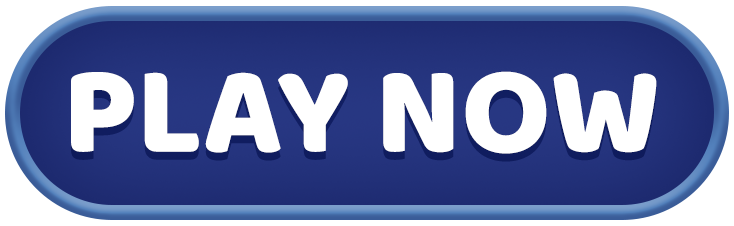
<style>
.page{position:relative;width:734px;height:226px;background:#ffffff}
.page>*{position:absolute;margin:0}
.t1{font:126.9px "Baloo-Regular";color:#ffffff}
</style>
<div class="page">
<p class="t1" style="left:71px;top:71px;width:586px;height:83px">PLAY NOW</p>
</div>
